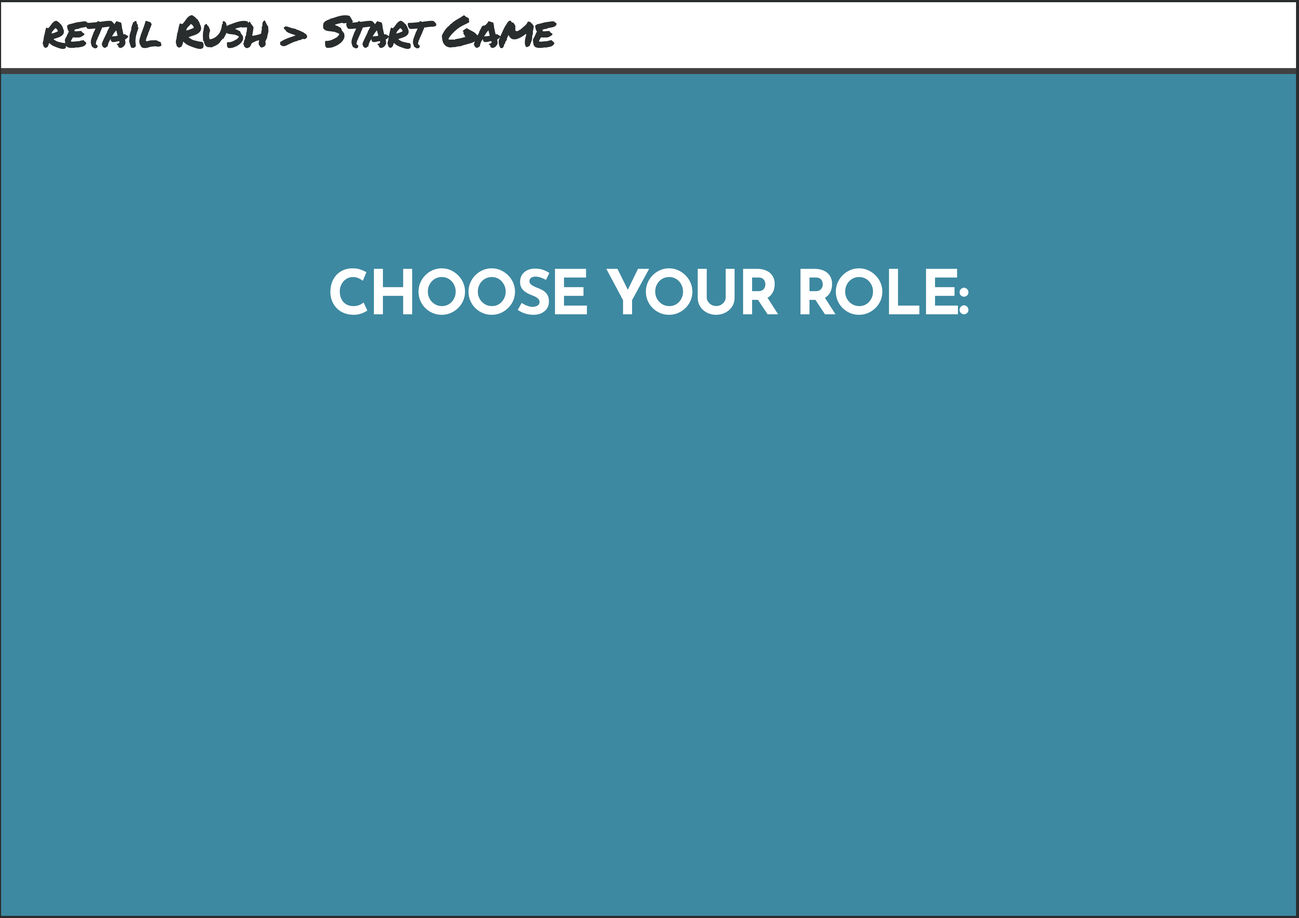
<style>
.page{position:relative;width:1299px;height:918px;background:#3d89a1}
.page>*{position:absolute;margin:0}
.t1{font:44px "PermanentMarker-Regular";letter-spacing:-0.04em;color:#2a2d2d}
.t2{font:61.7px "JosefinSans-Bold";letter-spacing:-0.04em;color:#ffffff}
</style>
<div class="page">
<p class="t1" style="left:43px;top:15px;width:513px;height:34px">retail Rush &gt; Start Game</p>
<p class="t2" style="left:330px;top:268px;width:638px;height:47px">CHOOSE YOUR ROLE:</p>
</div>
